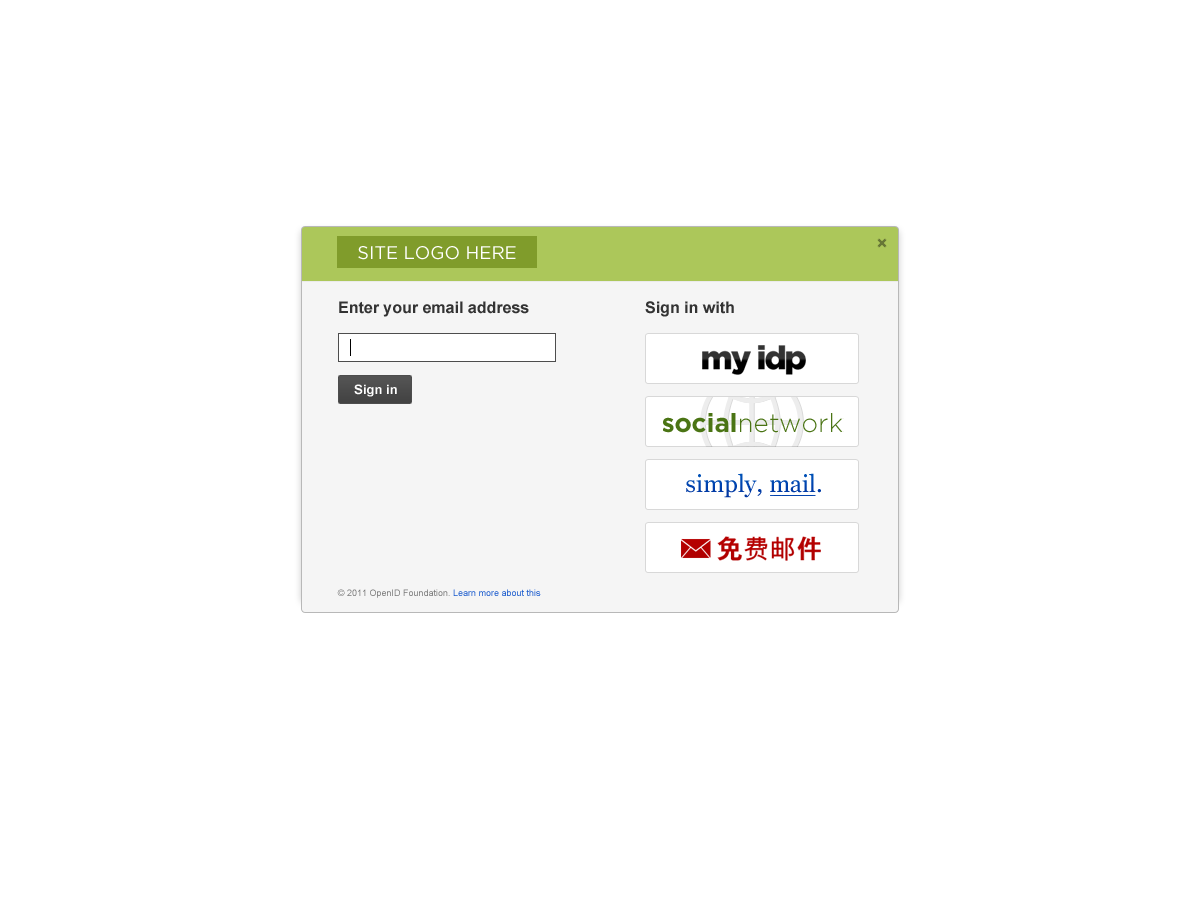
<style>
.page{position:relative;width:1200px;height:900px;background:#ffffff}
.page>*{position:absolute;margin:0}
.t1{font:16px "Arial-BoldMT";color:#333333}
.t2{font:13px "Arial-BoldMT";color:#ffffff}
.t3{font:9px "ArialMT";color:#767676}
.t4{font:9px "ArialMT";color:#1155cc}
</style>
<div class="page">
<p class="t1" style="left:339px;top:301px;width:190px;height:16px">Enter your email address</p>
<p class="t1" style="left:645px;top:301px;width:89px;height:16px">Sign in with</p>
<p class="t2" style="left:354px;top:384px;width:43px;height:13px">Sign in</p>
<p class="t3" style="left:337px;top:589px;width:204px;height:9px">© 2011 OpenID Foundation. <span class="t4">Learn more about this</span></p>
</div>
